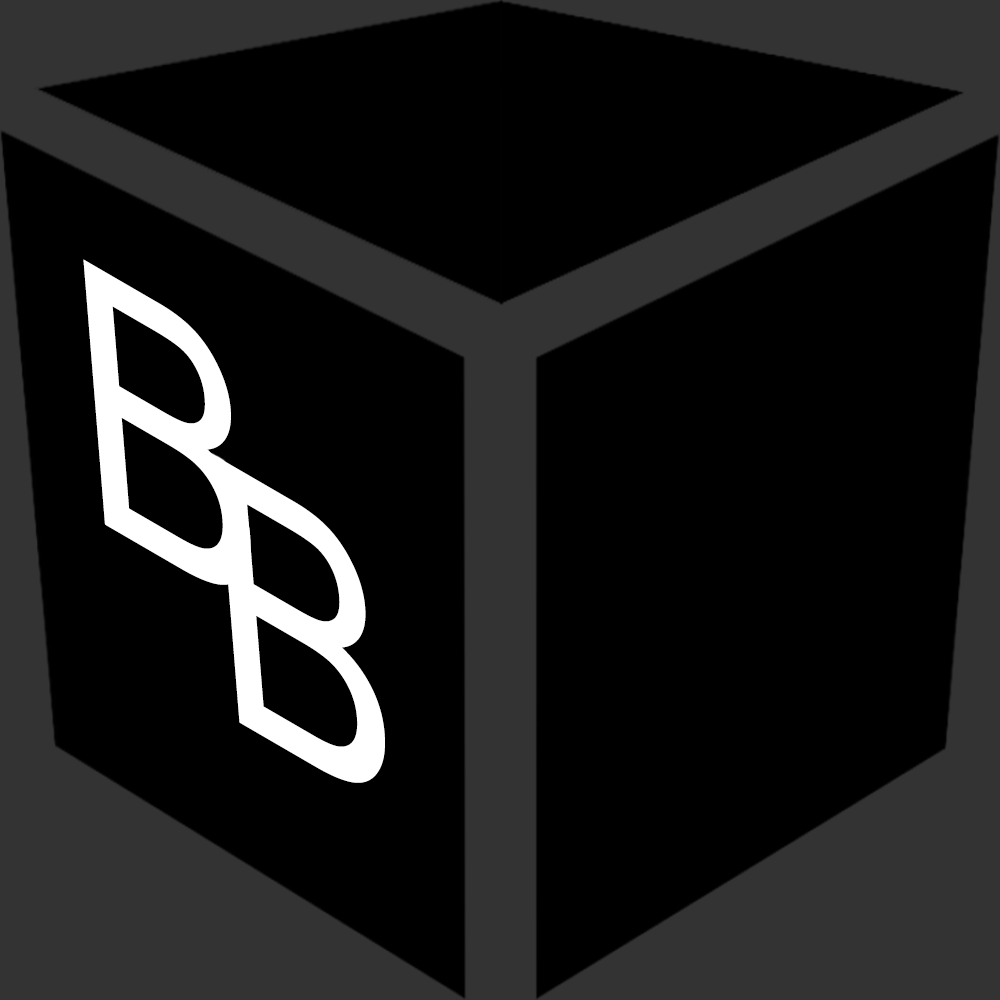
<style>
.page{position:relative;width:1000px;height:1000px;background:#000000}
.page>*{position:absolute;margin:0}
.t1{font:371.3px "ArialNarrow";color:#ffffff;scale:1.06 1}
</style>
<div class="page">
<p class="t1" style="left:83px;top:259px;width:168px;height:326px;rotate:30deg">B</p>
<p class="t1" style="left:218px;top:457px;width:167px;height:326px;rotate:30deg">B</p>
</div>
